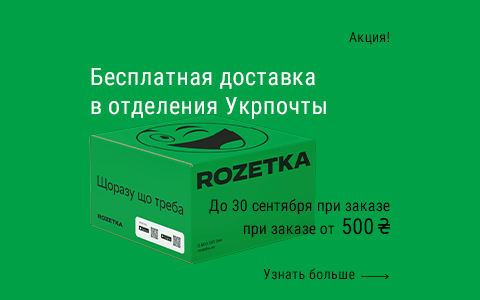
<style>
.page{position:relative;width:480px;height:300px;background:#00a046}
.page>*{position:absolute;margin:0}
.t1{font:14px "RobotoCondensed-Regular";letter-spacing:0.02em;color:#000000}
.t2{font:24px "RobotoCondensed-Regular";letter-spacing:0.02em;color:#ffffff}
.t3{font:16px "RobotoCondensed-Regular";color:#000000}
.t4{font:22px "RobotoCondensed-Regular";color:#000000}
</style>
<div class="page">
<p class="t1" style="left:349px;top:32px;width:40px;height:13px">Акция!</p>
<p class="t2" style="left:91px;top:68px;width:235px;height:51px">Бесплатная доставка в отделения Укрпочты</p>
<p class="t3" style="left:209px;top:198px;width:181px;height:17px">До 30 сентября при заказе</p>
<p class="t4" style="left:342px;top:218px;width:31px;height:17px">500</p>
<p class="t3" style="left:244px;top:225px;width:91px;height:13px">при заказе от</p>
<p class="t1" style="left:263px;top:268px;width:92px;height:12px">Узнать больше</p>
</div>
